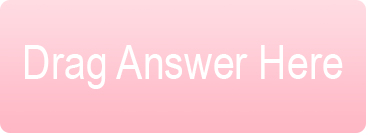
<style>
.page{position:relative;width:366px;height:133px}
.page>*{position:absolute;margin:0}
.t1{font:48px "ArialNarrow";color:#ffffff}
</style>
<div class="page">
<p class="t1" style="left:25px;top:45px;width:318px;height:44px">Drag Answer Here</p>
</div>
